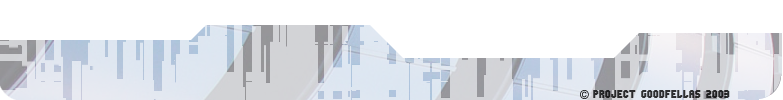
<style>
.page{position:relative;width:783px;height:100px;background:#ffffff}
.page>*{position:absolute;margin:0}
.t1{font:10px "RinoNormal";color:#2a2a2b}
</style>
<div class="page">
<p class="t1" style="left:593px;top:90px;width:137px;height:8px">project goodfellas 2003</p>
</div>
